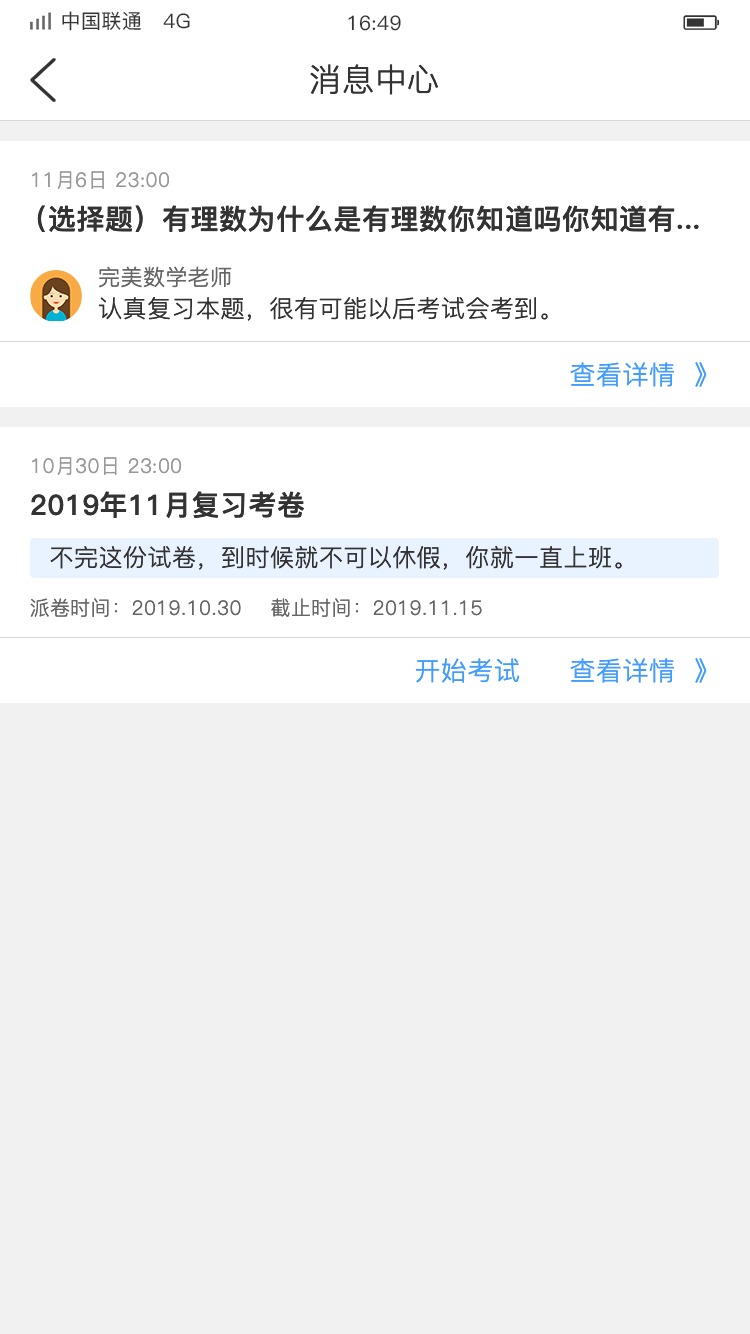
<style>
.page{position:relative;width:750px;height:1334px;background:#f1f1f1}
.page>*{position:absolute;margin:0}
.t1{font:20px "PingFang-SC-Medium";letter-spacing:0.02em;color:#333333}
.t2{font:32px "PingFang-SC-Regular";letter-spacing:0.02em;color:#333333}
.t3{font:20px "PingFang-SC-Regular";letter-spacing:0.02em;color:#999999}
.t4{font:28px "PingFang-SC-Bold";letter-spacing:0.02em;color:#333333}
.t5{font:22px "PingFang-SC-Regular";letter-spacing:0.02em;color:#666666}
.t6{font:24px "PingFang-SC-Regular";letter-spacing:0.02em;color:#333333}
.t7{font:26px "PingFang-SC-Regular";letter-spacing:0.02em;color:#409eff}
.t8{font:20px "PingFang-SC-Regular";letter-spacing:0.02em;color:#666666}
</style>
<div class="page">
<p class="t1" style="left:62px;top:11px;width:128px;height:20px">中国联通   4G</p>
<p class="t1" style="left:348px;top:15px;width:53px;height:16px">16:49</p>
<p class="t2" style="left:310px;top:64px;width:128px;height:31px">消息中心</p>
<p class="t3" style="left:32px;top:171px;width:137px;height:18px">11月6日 23:00</p>
<p class="t4" style="left:37px;top:205px;width:662px;height:27px">（选择题）有理数为什么是有理数你知道吗你知道有...</p>
<p class="t5" style="left:99px;top:266px;width:133px;height:22px">完美数学老师</p>
<p class="t6" style="left:99px;top:297px;width:449px;height:24px">认真复习本题，很有可能以后考试会考到。</p>
<p class="t7" style="left:570px;top:362px;width:137px;height:25px">查看详情  》</p>
<p class="t3" style="left:32px;top:457px;width:149px;height:18px">10月30日 23:00</p>
<p class="t4" style="left:31px;top:491px;width:274px;height:27px">2019年11月复习考卷</p>
<p class="t6" style="left:50px;top:546px;width:572px;height:24px">不完这份试卷，到时候就不可以休假，你就一直上班。</p>
<p class="t8" style="left:30px;top:598px;width:211px;height:19px">派卷时间：2019.10.30</p>
<p class="t8" style="left:271px;top:598px;width:211px;height:19px">截止时间：2019.11.15</p>
<p class="t7" style="left:415px;top:658px;width:105px;height:25px">开始考试</p>
<p class="t7" style="left:570px;top:658px;width:137px;height:25px">查看详情  》</p>
</div>
